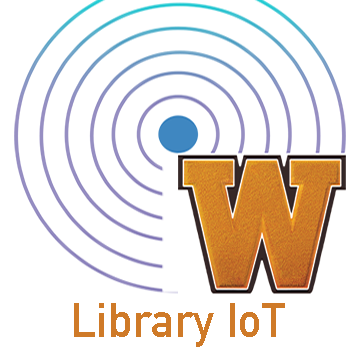
<style>
.page{position:relative;width:360px;height:360px;background:#ffffff}
.page>*{position:absolute;margin:0}
.t1{font:48px "DINAlternate-Bold";color:#cf7a28}
</style>
<div class="page">
<p class="t1" style="left:74px;top:303px;width:211px;height:44px">Library IoT</p>
</div>
